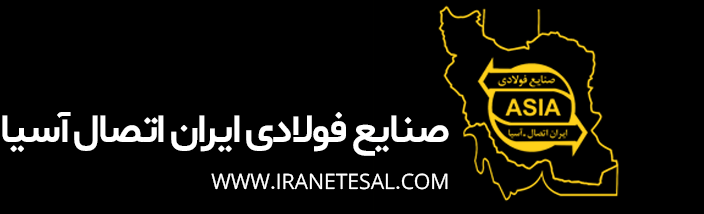
<style>
.page{position:relative;width:704px;height:214px;background:#000000}
.page>*{position:absolute;margin:0}
.t1{font:40.8px "Shabnam-Bold";letter-spacing:-0.04em;color:#ffffff}
.t2{font:21.1px "Samim";color:#ffffff}
</style>
<div class="page">
<p class="t1" style="left:2px;top:112px;width:447px;height:44px">صنايع فولادی ايران اتصال آسيا</p>
<p class="t2" style="left:211px;top:173px;width:237px;height:17px">WWW.IRANETESAL.COM</p>
</div>
